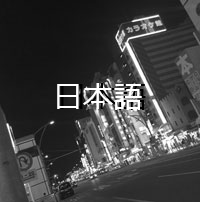
<style>
.page{position:relative;width:200px;height:202px}
.page>*{position:absolute;margin:0}
.t1{font:30px "Meiryo";color:#ffffff}
</style>
<div class="page">
<p class="t1" style="left:57px;top:83px;width:85px;height:27px">日本語</p>
</div>
